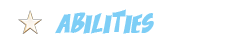
<style>
.page{position:relative;width:250px;height:45px;background:#ffffff}
.page>*{position:absolute;margin:0}
.t1{font:30px "HoustonComicsPersonalUse";color:#7ecef6}
</style>
<div class="page">
<p class="t1" style="left:55px;top:9px;width:99px;height:25px">ABILITIES</p>
</div>
